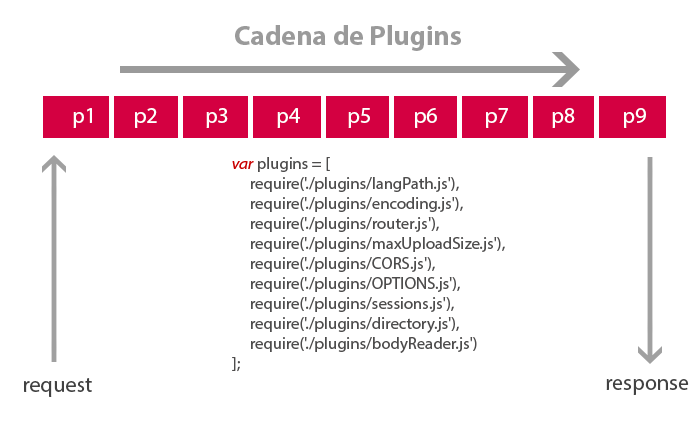
<style>
.page{position:relative;width:700px;height:431px;background:#ffffff}
.page>*{position:absolute;margin:0}
.t1{font:27.8px "MyriadPro-Bold";color:#9a9a9a}
.t2{font:22.2px "MyriadPro-Regular";color:#ffffff}
.t3{font:16.7px "MyriadPro-Regular";color:#4d4c4c}
.t4{font:16.7px "MyriadPro-It";color:#c80000}
.t5{font:22.2px "MyriadPro-Regular";color:#414141}
</style>
<div class="page">
<p class="t1" style="left:235px;top:25px;width:226px;height:26px">Cadena de Plugins</p>
<p class="t2" style="left:73px;top:108px;width:573px;height:20px">p1        p2          p3          p4          p5         p6          p7         p8          p9</p>
<p class="t3" style="left:232px;top:157px;width:273px;height:215px"><span class="t4">var</span> plugins = [<br>     require('./plugins/langPath.js'),<br>     require('./plugins/encoding.js'),<br>     require('./plugins/router.js'),<br>     require('./plugins/maxUploadSize.js'),<br>     require('./plugins/CORS.js'),<br>     require('./plugins/OPTIONS.js'),<br>     require('./plugins/sessions.js'),<br>     require('./plugins/directory.js'),<br>     require('./plugins/bodyReader.js')<br>];</p>
<p class="t5" style="left:24px;top:378px;width:68px;height:19px">request</p>
<p class="t5" style="left:606px;top:379px;width:83px;height:16px">response</p>
</div>
